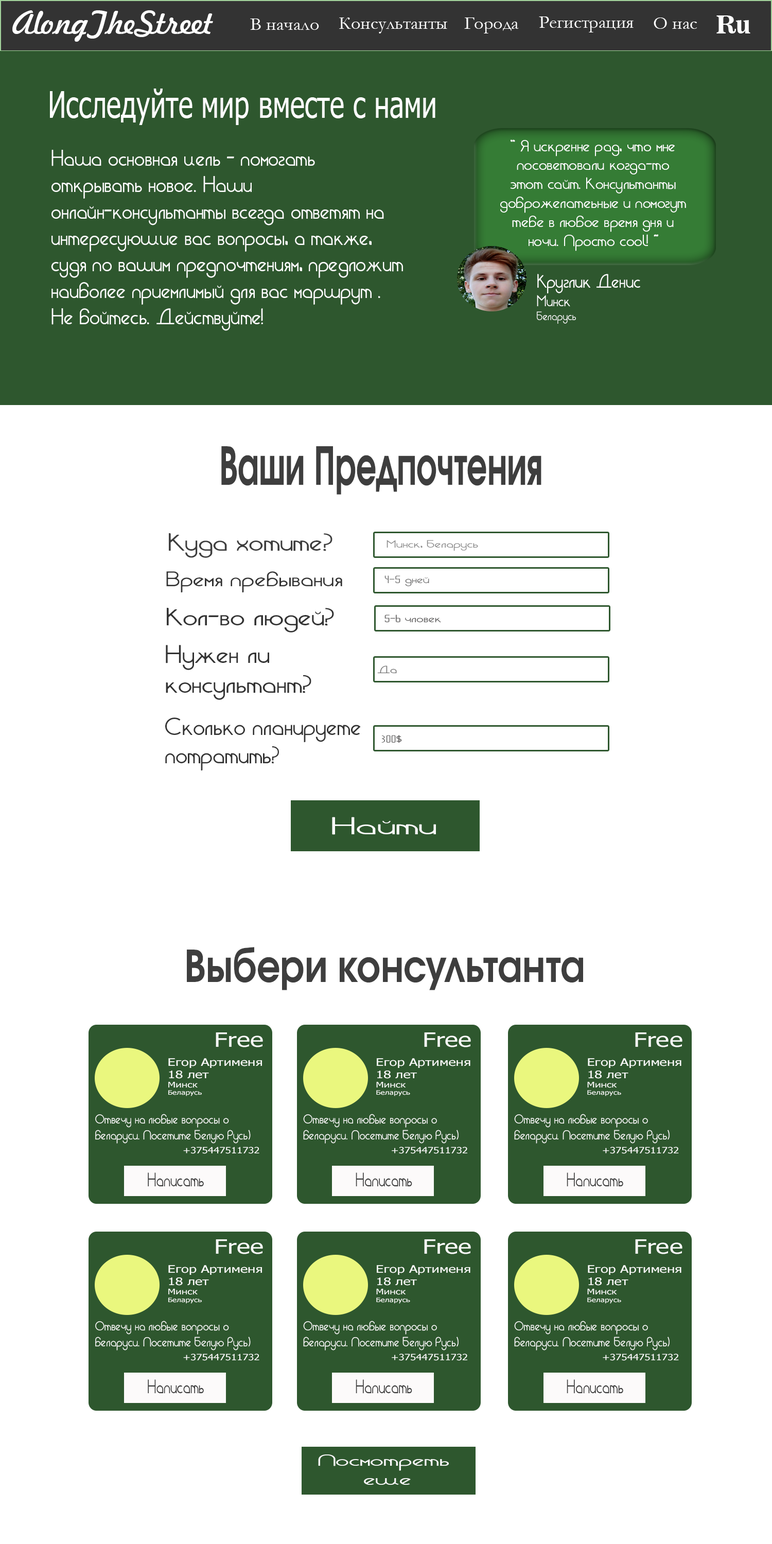
<style>
.page{position:relative;width:772px;height:1544px;background:#ffffff}
.page>*{position:absolute;margin:0}
.t1{font:30.9px "Freehand521BT-RegularC";color:#ffffff}
.t2{font:18.5px "Garamond";color:#ffffff}
.t3{font:24.7px "News706BT-BoldC";color:#ffffff}
.t4{font:37.1px "Tahoma";color:#ffffff;scale:0.74 1}
.t5{font:22px "CitricaCyrillic";color:#ffffff}
.t6{font:15.8px "CitricaCyrillic";color:#ffffff;scale:1.1 1}
.t7{font:18.9px "CitricaCyrillic";color:#ffffff}
.t8{font:15.3px "CitricaCyrillic";color:#ffffff}
.t9{font:11.8px "CitricaCyrillic";color:#ffffff}
.t10{font:52.2px "Evolventa-Bold";color:#3e3e3e;scale:0.61 1}
.t11{font:24.2px "CitricaCyrillic";color:#3e3e3e;scale:1.3 1}
.t12{font:10.3px "CitricaCyrillic";color:#8b8b8b;scale:1.46 1}
.t13{font:20.6px "CitricaCyrillic";color:#333333;scale:1.3 1}
.t14{font:10.3px "CitricaCyrillic";color:#757575;scale:1.46 1}
.t15{font:24.2px "CitricaCyrillic";color:#333333;scale:1.3 1}
.t16{font:10.3px "CitricaCyrillic";color:#605e5e;scale:1.46 1}
.t17{font:24.8px "CitricaCyrillic";color:#333333;scale:1.2 1}
.t18{font:10.3px "CitricaCyrillic";color:#747474;scale:1.46 1}
.t19{font:23.8px "CitricaCyrillic";color:#333333;scale:1.07 1}
.t20{font:10.3px "CitricaCyrillic";color:#6b6a6a;scale:1.46 1}
.t21{font:23.6px "CitricaCyrillic";color:#fbfbfb;scale:1.87 1}
.t22{font:43.9px "Evolventa-Bold";color:#3e3e3e;scale:0.84 1}
.t23{font:19.8px "Tahoma";color:#fafbf9;scale:1.29 1}
.t24{font:10.4px "Tahoma";color:#fafbf9;scale:1.34 1}
.t25{font:7.8px "Tahoma";color:#fafbf9;scale:1.34 1}
.t26{font:6.1px "Tahoma";color:#fafbf9;scale:1.34 1}
.t27{font:13px "CitricaCyrillic";color:#fafbf9;scale:0.97 1}
.t28{font:8.6px "Tahoma";color:#fafbf9;scale:1.23 1}
.t29{font:18.8px "CitricaCyrillic";color:#3b3b3b;scale:0.83 1}
.t30{font:15.8px "CitricaCyrillic";color:#fbfbfb;scale:1.81 1}
</style>
<div class="page">
<p class="t1" style="left:12px;top:10px;width:201px;height:32px">AlongTheStreet</p>
<p class="t2" style="left:339px;top:18px;width:109px;height:15px">Консультанты</p>
<p class="t2" style="left:464px;top:18px;width:55px;height:15px">Города</p>
<p class="t2" style="left:539px;top:16px;width:95px;height:16px">Регистрация</p>
<p class="t2" style="left:654px;top:18px;width:43px;height:11px">О нас</p>
<p class="t3" style="left:717px;top:15px;width:34px;height:18px">Ru</p>
<p class="t2" style="left:250px;top:19px;width:69px;height:11px">В начало</p>
<p class="t4" style="left:50px;top:89px;width:385px;height:36px">Исследуйте мир вместе с нами</p>
<p class="t5" style="left:51px;top:150px;width:352px;height:181px">Наша основная цель - помогать открывать новое. Наши онлайн-консультанты всегда ответят на <br>интересующие вас вопросы, а также, судя по вашим предпочтениям, предложит наиболее приемлимый для вас маршрут .<br>Не бойтесь. Действуйте!</p>
<p class="t6" style="left:500px;top:140px;width:186px;height:111px;text-align:center">«Я искренне рад, что мне <br>посоветовали когда-то<br>этот сайт. Консультанты доброжелатеьные и помогут <br>тебе в любое время дня и ночи. Просто cool!»</p>
<p class="t7" style="left:537px;top:274px;width:103px;height:50px">Круглик Денис<br><span class="t8">Минск<br></span><span class="t9">Беларусь</span></p>
<p class="t10" style="left:221px;top:446px;width:321px;height:49px">Ваши Предпочтения</p>
<p class="t11" style="left:169px;top:533px;width:164px;height:25px">Куда хотите?</p>
<p class="t12" style="left:387px;top:540px;width:91px;height:11px">Минск, Беларусь</p>
<p class="t13" style="left:166px;top:571px;width:176px;height:21px">Время пребывания</p>
<p class="t14" style="left:385px;top:576px;width:44px;height:10px">4-5 дней</p>
<p class="t15" style="left:167px;top:608px;width:167px;height:25px">Кол-во людей?</p>
<p class="t16" style="left:385px;top:615px;width:56px;height:7px">5-6 чловек</p>
<p class="t17" style="left:166px;top:645px;width:145px;height:55px">Нужен ли <br>консультант?</p>
<p class="t18" style="left:377px;top:666px;width:20px;height:7px">Да</p>
<p class="t19" style="left:165px;top:718px;width:196px;height:53px">Сколько планируете <br>потратить?</p>
<p class="t20" style="left:381px;top:735px;width:21px;height:8px">300$</p>
<p class="t21" style="left:332px;top:817px;width:104px;height:18px">Найти</p>
<p class="t22" style="left:187px;top:947px;width:396px;height:43px">Выбери консультанта</p>
<p class="t23" style="left:216px;top:1033px;width:47px;height:15px">Free</p>
<p class="t23" style="left:424px;top:1033px;width:47px;height:15px">Free</p>
<p class="t23" style="left:635px;top:1033px;width:48px;height:15px">Free</p>
<p class="t24" style="left:168px;top:1058px;width:94px;height:38px">Егор Артименя<br>18 лет<br><span class="t25">Минск<br></span><span class="t26">Беларусь</span></p>
<p class="t24" style="left:376px;top:1058px;width:94px;height:38px">Егор Артименя<br>18 лет<br><span class="t25">Минск<br></span><span class="t26">Беларусь</span></p>
<p class="t24" style="left:587px;top:1058px;width:95px;height:38px">Егор Артименя<br>18 лет<br><span class="t25">Минск<br></span><span class="t26">Беларусь</span></p>
<p class="t27" style="left:95px;top:1114px;width:156px;height:30px">Отвечу на любые вопросы о беларуси. Посетите Белую Русь)</p>
<p class="t27" style="left:303px;top:1114px;width:156px;height:30px">Отвечу на любые вопросы о беларуси. Посетите Белую Русь)</p>
<p class="t27" style="left:514px;top:1114px;width:156px;height:30px">Отвечу на любые вопросы о беларуси. Посетите Белую Русь)</p>
<p class="t28" style="left:183px;top:1147px;width:76px;height:7px">+375447511732</p>
<p class="t28" style="left:392px;top:1147px;width:75px;height:7px">+375447511732</p>
<p class="t28" style="left:603px;top:1147px;width:76px;height:7px">+375447511732</p>
<p class="t29" style="left:148px;top:1173px;width:56px;height:14px">Написать</p>
<p class="t29" style="left:356px;top:1173px;width:56px;height:14px">Написать</p>
<p class="t29" style="left:567px;top:1173px;width:56px;height:14px">Написать</p>
<p class="t23" style="left:216px;top:1240px;width:47px;height:14px">Free</p>
<p class="t23" style="left:424px;top:1240px;width:47px;height:14px">Free</p>
<p class="t23" style="left:635px;top:1240px;width:48px;height:14px">Free</p>
<p class="t24" style="left:168px;top:1265px;width:94px;height:39px">Егор Артименя<br>18 лет<br><span class="t25">Минск<br></span><span class="t26">Беларусь</span></p>
<p class="t24" style="left:376px;top:1265px;width:94px;height:39px">Егор Артименя<br>18 лет<br><span class="t25">Минск<br></span><span class="t26">Беларусь</span></p>
<p class="t24" style="left:587px;top:1265px;width:95px;height:39px">Егор Артименя<br>18 лет<br><span class="t25">Минск<br></span><span class="t26">Беларусь</span></p>
<p class="t27" style="left:95px;top:1321px;width:156px;height:30px">Отвечу на любые вопросы о беларуси. Посетите Белую Русь)</p>
<p class="t27" style="left:303px;top:1321px;width:156px;height:30px">Отвечу на любые вопросы о беларуси. Посетите Белую Русь)</p>
<p class="t27" style="left:514px;top:1321px;width:156px;height:30px">Отвечу на любые вопросы о беларуси. Посетите Белую Русь)</p>
<p class="t28" style="left:183px;top:1354px;width:76px;height:7px">+375447511732</p>
<p class="t28" style="left:392px;top:1354px;width:75px;height:7px">+375447511732</p>
<p class="t28" style="left:603px;top:1354px;width:76px;height:7px">+375447511732</p>
<p class="t29" style="left:148px;top:1380px;width:56px;height:13px">Написать</p>
<p class="t29" style="left:356px;top:1380px;width:56px;height:13px">Написать</p>
<p class="t29" style="left:567px;top:1380px;width:56px;height:13px">Написать</p>
<p class="t29" style="left:567px;top:1380px;width:56px;height:13px">Написать</p>
<p class="t30" style="left:318px;top:1455px;width:131px;height:30px;text-align:center">Посмотреть <br>еще</p>
</div>
